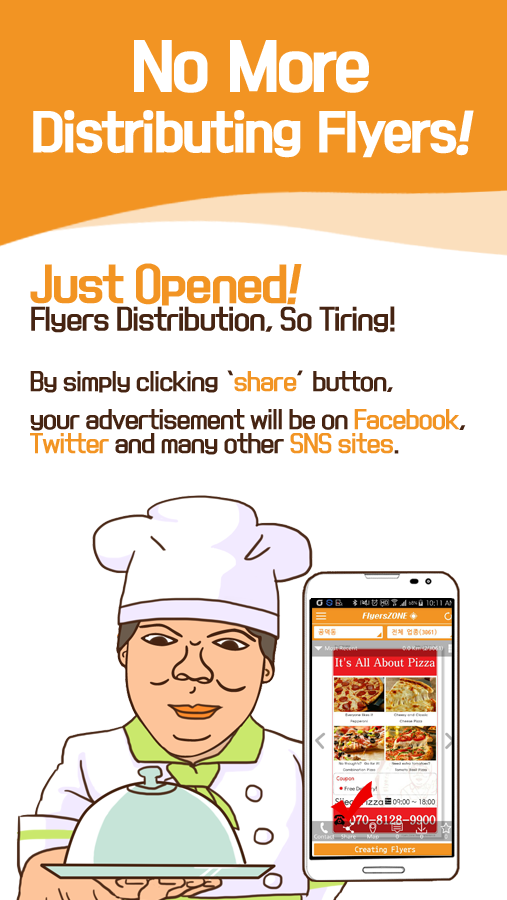
<style>
.page{position:relative;width:507px;height:900px;background:#ffffff}
.page>*{position:absolute;margin:0}
.t1{font:48px/72px "KoreanBLACK-B";letter-spacing:-0.05em;color:#ffffff}
.t2{font:60px/72px "KoreanBLACK-B";letter-spacing:-0.05em;color:#ffffff}
.t3{font:48px/72px "KoreanBLACK-B";letter-spacing:-0.05em;color:#ffffff;font-style:italic}
.t4{font:26px/42px "KoreanYNMYT-M";letter-spacing:-0.05em;color:#462412}
.t5{font:42px/42px "KoreanYNMYT-B";letter-spacing:-0.05em;color:#f29423}
.t6{font:42px/42px "KoreanYNMYT-B";letter-spacing:-0.05em;color:#f29423;font-style:italic}
.t7{font:22px/14px "KoreanYNMYT-M";letter-spacing:-0.05em;color:#462412}
.t8{font:22px/24px "KoreanYNMYT-M";letter-spacing:-0.05em;color:#462412}
.t9{font:22px/14px "KoreanYNMYT-M";letter-spacing:-0.05em;color:#f29423}
.t10{font:22px/24px "KoreanYNMYT-M";letter-spacing:-0.05em;color:#f29423}
</style>
<div class="page">
<p class="t1" style="left:33px;top:40px;width:441px;height:118px;text-align:center"><span class="t2">No More<br></span>Distributing Flyers<span class="t3">!</span></p>
<p class="t4" style="left:30px;top:263px;width:365px;height:70px"><span class="t5">Just Opened</span><span class="t6">!<br></span>Flyers Distribution, So Tiring!</p>
<p class="t7" style="left:30px;top:370px;width:436px;height:85px"><span class="t8">By simply clicking </span>‘<span class="t9">share</span>’ button, <br><br>your advertisement <span class="t8">will be on </span><span class="t10">Facebook</span><span class="t8">, <br></span><span class="t10">Twitter </span><span class="t8">and many other </span><span class="t10">SNS sites</span><span class="t8">.</span></p>
</div>
